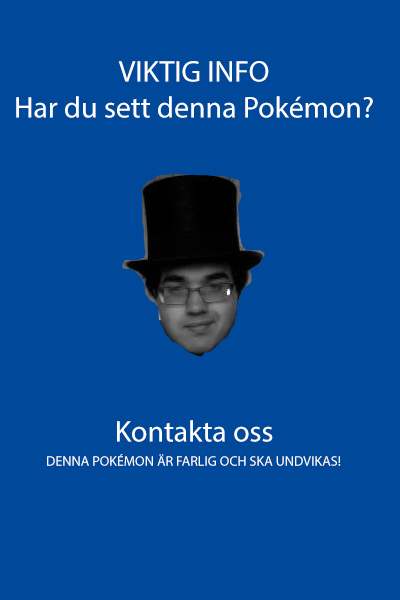
<style>
.page{position:relative;width:400px;height:600px;background:#004899}
.page>*{position:absolute;margin:0}
.t1{font:30px "MyriadPro-Regular";color:#ffffff}
.t2{font:14px "MyriadPro-Regular";color:#ffffff}
</style>
<div class="page">
<p class="t1" style="left:16px;top:61px;width:357px;height:381px;text-align:center">VIKTIG INFO<br>Har du sett denna Pokémon?<br><br><br><br><br><br><br><br><br>Kontakta oss</p>
<p class="t2" style="left:47px;top:454px;width:294px;height:12px">DENNA POKÉMON ÄR FARLIG OCH SKA UNDVIKAS!</p>
</div>
